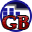
<style>
.page{position:relative;width:32px;height:32px;background:#ffffff}
.page>*{position:absolute;margin:0}
.t1{font:18.5px "PalatinoLinotype-Bold"}
</style>
<div class="page">
<p class="t1" style="left:2px;top:16px;width:27px;height:13px">GB</p>
</div>
